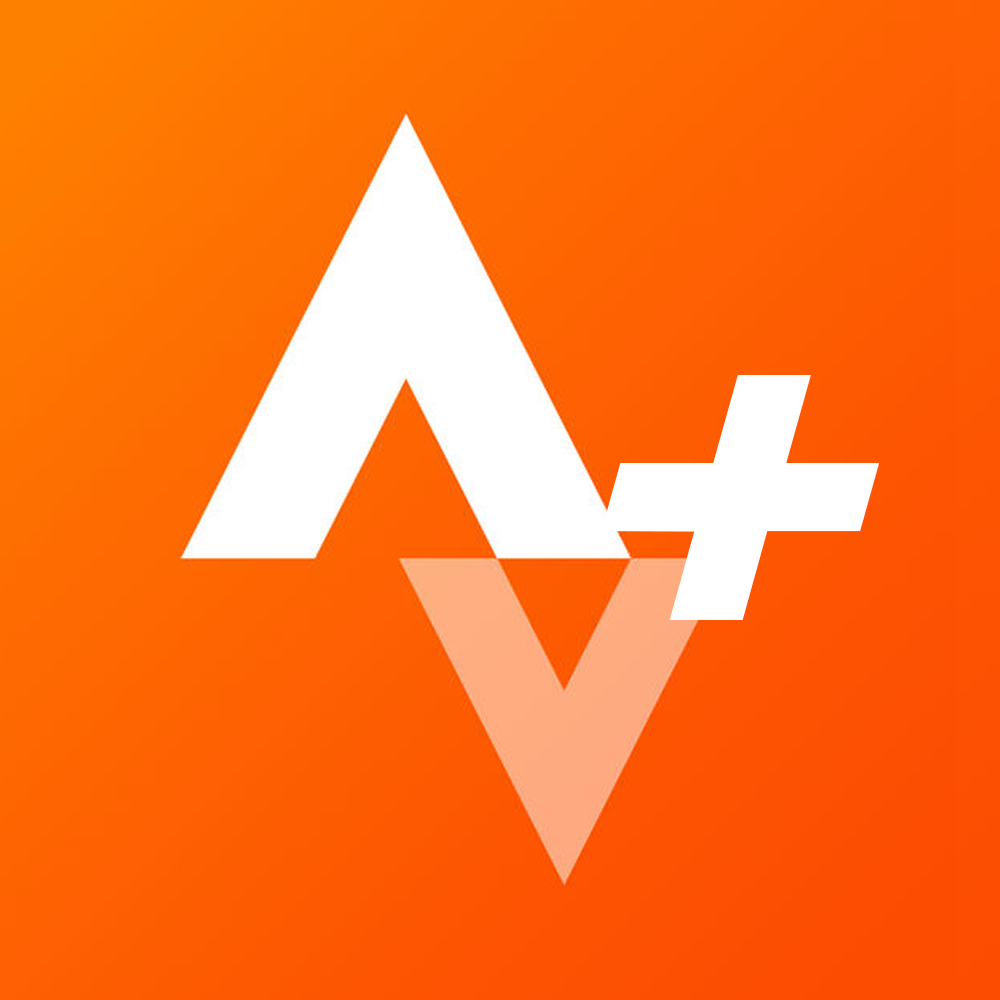
<style>
.page{position:relative;width:1000px;height:1000px}
.page>*{position:absolute;margin:0}
.t1{font:492.8px "Gotham-BoldItalic";letter-spacing:-0.12em;color:#ffffff;scale:1.04 1}
</style>
<div class="page">
<p class="t1" style="left:601px;top:375px;width:279px;height:245px">+</p>
</div>
